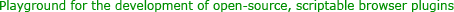
<style>
.page{position:relative;width:454px;height:12px;background:#ffffff}
.page>*{position:absolute;margin:0}
.t1{font:12px "Verdana";color:#008f00}
</style>
<div class="page">
<p class="t1" style="left:0px;top:0px;width:454px;height:12px">Playground for the development of open-source, scriptable browser plugins</p>
</div>
